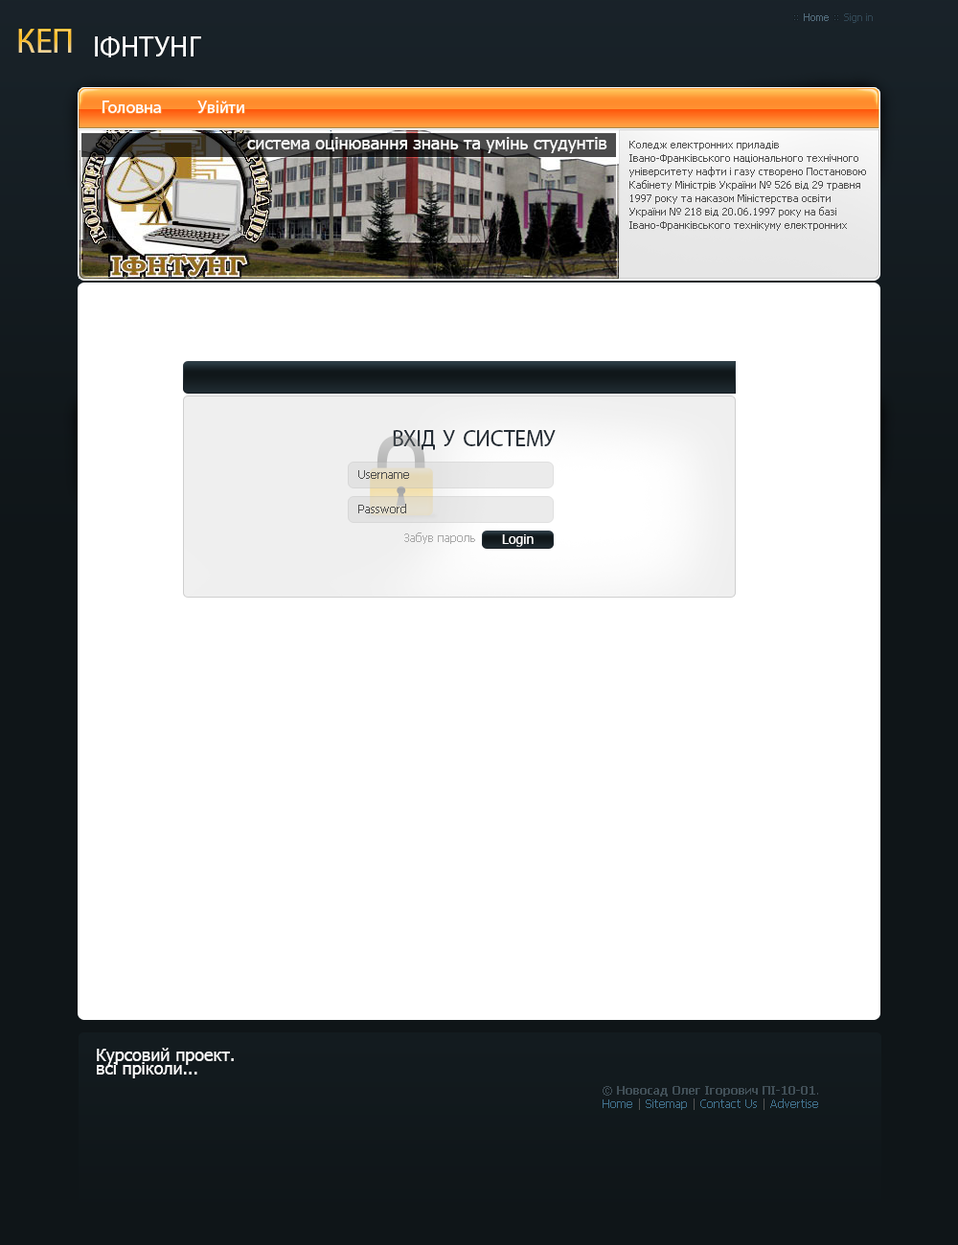
<style>
.page{position:relative;width:958px;height:1245px;background:#ffffff}
.page>*{position:absolute;margin:0}
.t1{font:10.5px "Tahoma";color:#304653}
.t2{font:10.5px "Tahoma";color:#536d7d}
.t3{font:34.5px "MyriadPro-Regular"}
.t4{font:28.7px "MyriadPro-Regular";color:#ffffff}
.t5{font:17.2px "MyriadPro-Regular";color:#ffffff}
.t6{font:17.2px "Tahoma";color:#fefefe}
.t7{font:10.5px/13.4px "Tahoma";color:#4f4f4f}
.t8{font:23px "MyriadPro-Regular";letter-spacing:-0.025em;color:#262e36;text-transform:uppercase}
.t9{font:11.5px "Tahoma";color:#4f4f4f}
.t10{font:11.5px "Tahoma";color:#a8a8a8}
.t11{font:13.4px "Tahoma";color:#fefefe}
.t12{font:17.2px/13.4px "Tahoma";color:#fefefe}
.t13{font:11.5px/13.4px "Tahoma-Bold";color:#414f57}
.t14{font:11.5px/13.4px "Tahoma";color:#414f57}
.t15{font:11.5px/13.4px "Tahoma";color:#41718d}
.t16{font:11.5px/13.4px "Tahoma";color:#555555}
</style>
<div class="page">
<p class="t1" style="left:804px;top:13px;width:68px;height:10px"><span class="t2">Home</span>     Sign in</p>
<p class="t3" style="left:18px;top:29px;width:54px;height:24px">КЕП</p>
<p class="t4" style="left:95px;top:36px;width:106px;height:21px">ІФНТУНГ</p>
<p class="t5" style="left:102px;top:101px;width:142px;height:12px">Головна          Увійти</p>
<p class="t6" style="left:247px;top:137px;width:360px;height:16px">система оцінювання знань та умінь студунтів</p>
<p class="t7" style="left:629px;top:141px;width:237px;height:90px">Коледж електронних приладів Івано-Франківського національного технічного університету нафти і газу створено Постановою Кабінету Міністрів України № 526 від 29 травня 1997 року та наказом Міністерства освіти України № 218 від 20.06.1997 року на базі Івано-Франківського технікуму електронних приладів, який ліквідовано.</p>
<p class="t8" style="left:393px;top:430px;width:162px;height:20px">Вхід у систему</p>
<p class="t9" style="left:358px;top:470px;width:51px;height:9px">Username</p>
<p class="t9" style="left:358px;top:504px;width:48px;height:9px">Password</p>
<p class="t10" style="left:404px;top:533px;width:71px;height:11px">Забув пароль</p>
<p class="t11" style="left:502px;top:534px;width:31px;height:13px">Login</p>
<p class="t12" style="left:97px;top:1048px;width:137px;height:30px">Курсовий проект.<br>всі пріколи...</p>
<p class="t13" style="left:602px;top:1086px;width:216px;height:24px;text-align:center"><span class="t14">© </span>Новосад Олег Ігорович ПІ-10-01<span class="t14">.<br></span><span class="t15">Home</span><span class="t16"> | </span><span class="t15">Sitemap</span><span class="t16"> | </span><span class="t15">Contact Us</span><span class="t16"> | </span><span class="t15">Advertise</span></p>
</div>
